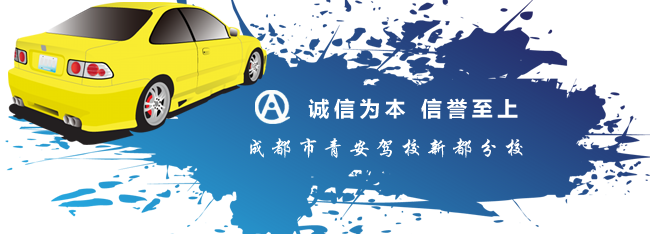
<style>
.page{position:relative;width:650px;height:234px;background:#ffffff}
.page>*{position:absolute;margin:0}
.t1{font:20.8px "MicrosoftYaHei-Bold";letter-spacing:0.22em;color:#ffffff}
.t2{font:20.8px "STXingkai";letter-spacing:0.24em;color:#ffffff}
</style>
<div class="page">
<p class="t1" style="left:308px;top:98px;width:210px;height:21px">诚信为本 信誉至上</p>
<p class="t2" style="left:250px;top:138px;width:273px;height:20px">成都市青安驾校新都分校</p>
</div>
